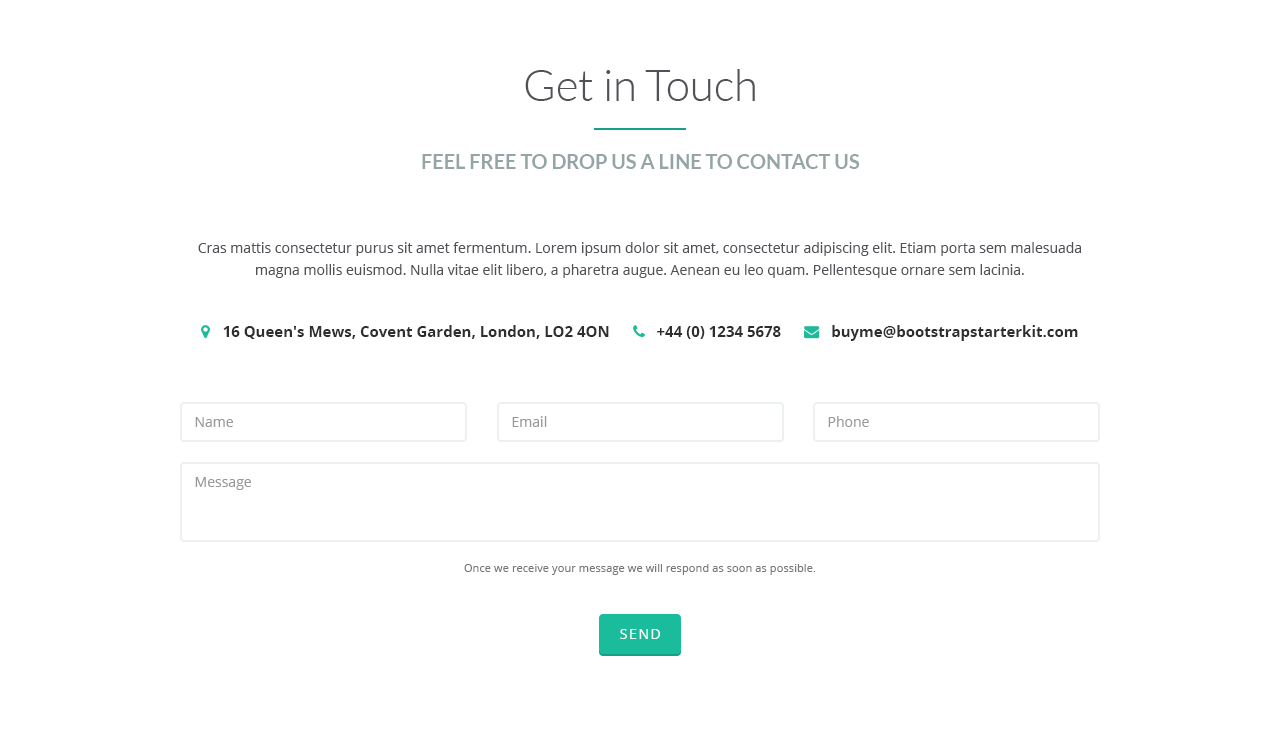
<style>
.page{position:relative;width:1280px;height:740px;background:#ffffff}
.page>*{position:absolute;margin:0}
.t1{font:44px "Lato-Light";color:#515157}
.t2{font:20px "Lato-Bold";color:#95a5a6}
.t3{font:14px/22px "OpenSans";color:#515157}
.t4{font:14px "OpenSans";color:#999999}
.t5{font:11.2px "OpenSans";color:#777777}
.t6{font:14px "OpenSans";letter-spacing:0.11em;color:#ffffff}
</style>
<div class="page">
<p class="t1" style="left:525px;top:69px;width:230px;height:32px">Get in Touch</p>
<p class="t2" style="left:422px;top:154px;width:438px;height:15px">FEEL FREE TO DROP US A LINE TO CONTACT US</p>
<p class="t3" style="left:198px;top:242px;width:883px;height:36px;text-align:center">Cras mattis consectetur purus sit amet fermentum. Lorem ipsum dolor sit amet, consectetur adipiscing elit. Etiam porta sem malesuada magna mollis euismod. Nulla vitae elit libero, a pharetra augue. Aenean eu leo quam. Pellentesque ornare sem lacinia.</p>
<p class="t4" style="left:195px;top:417px;width:38px;height:10px">Name</p>
<p class="t4" style="left:512px;top:416px;width:35px;height:11px">Email</p>
<p class="t4" style="left:828px;top:416px;width:41px;height:11px">Phone</p>
<p class="t4" style="left:195px;top:477px;width:56px;height:13px">Message</p>
<p class="t5" style="left:464px;top:564px;width:352px;height:11px">Once we receive your message we will respond as soon as possible.</p>
<p class="t6" style="left:620px;top:629px;width:40px;height:10px">SEND</p>
</div>
